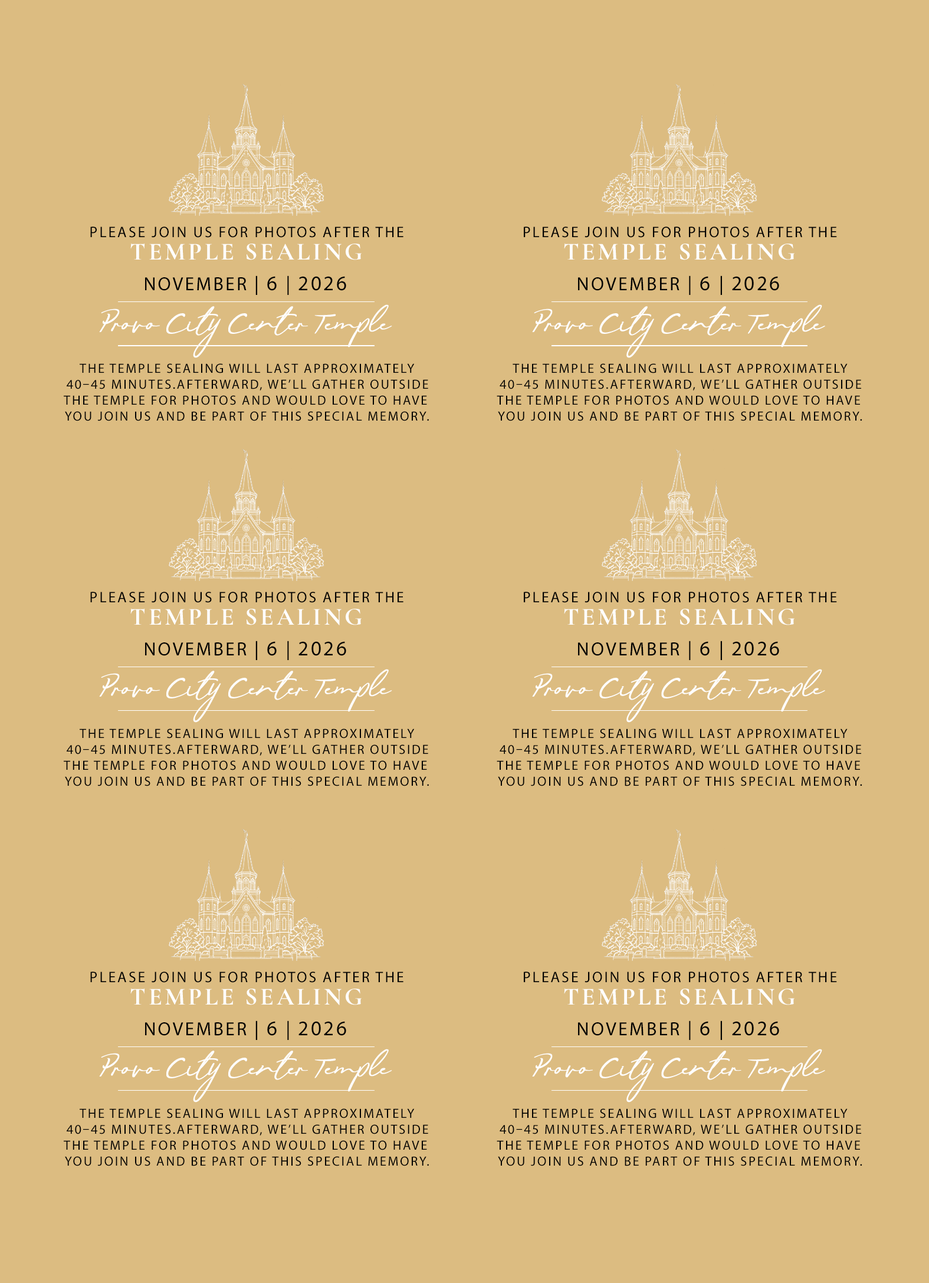
<style>
.page{position:relative;width:929px;height:1283px;background:#dcbc81}
.page>*{position:absolute;margin:0}
.t1{font:15.2px "MyriadPro-Regular";letter-spacing:0.1em;color:#000000;text-transform:uppercase}
.t2{font:24.7px "CormorantGaramond-Bold";letter-spacing:0.1em;color:#ffffff;text-transform:uppercase}
.t3{font:19px "MyriadPro-Regular";letter-spacing:0.1em;color:#000000}
.t4{font:20.9px "MyriadPro-Regular";letter-spacing:0.1em;color:#000000}
.t5{font:19px "ClagistaRegular";letter-spacing:-0.06em;color:#ffffff;font-weight:bold}
.t6{font:13.3px "MyriadPro-Regular";letter-spacing:0.1em;color:#000000;text-transform:uppercase}
</style>
<div class="page">
<p class="t1" style="left:90px;top:227px;width:314px;height:11px">Please join us for photos after the</p>
<p class="t1" style="left:524px;top:227px;width:313px;height:11px">Please join us for photos after the</p>
<p class="t2" style="left:130px;top:243px;width:232px;height:17px">Temple Sealing</p>
<p class="t2" style="left:564px;top:243px;width:231px;height:17px">Temple Sealing</p>
<p class="t3" style="left:145px;top:276px;width:201px;height:19px">NOVEMBER | <span class="t4">6 </span>| <span class="t4">2026</span></p>
<p class="t3" style="left:578px;top:276px;width:201px;height:19px">NOVEMBER | <span class="t4">6 </span>| <span class="t4">2026</span></p>
<p class="t5" style="left:99px;top:304px;width:293px;height:54px;text-align:center">Provo City Center Temple</p>
<p class="t5" style="left:532px;top:304px;width:293px;height:54px;text-align:center">Provo City Center Temple</p>
<p class="t6" style="left:64px;top:363px;width:365px;height:58px;text-align:center">The temple sealing will last approximately<br> 40–45 minutes.Afterward, we’ll gather outside <br>the temple for photos and would love to have <br>you join us and be part of this special memory.</p>
<p class="t6" style="left:497px;top:363px;width:366px;height:58px;text-align:center">The temple sealing will last approximately<br> 40–45 minutes.Afterward, we’ll gather outside <br>the temple for photos and would love to have <br>you join us and be part of this special memory.</p>
<p class="t1" style="left:90px;top:592px;width:314px;height:11px">Please join us for photos after the</p>
<p class="t1" style="left:524px;top:592px;width:313px;height:11px">Please join us for photos after the</p>
<p class="t2" style="left:130px;top:608px;width:232px;height:17px">Temple Sealing</p>
<p class="t2" style="left:564px;top:608px;width:231px;height:17px">Temple Sealing</p>
<p class="t3" style="left:145px;top:641px;width:201px;height:19px">NOVEMBER | <span class="t4">6 </span>| <span class="t4">2026</span></p>
<p class="t3" style="left:578px;top:641px;width:201px;height:19px">NOVEMBER | <span class="t4">6 </span>| <span class="t4">2026</span></p>
<p class="t5" style="left:99px;top:669px;width:293px;height:54px;text-align:center">Provo City Center Temple</p>
<p class="t5" style="left:532px;top:669px;width:293px;height:54px;text-align:center">Provo City Center Temple</p>
<p class="t6" style="left:64px;top:729px;width:365px;height:57px;text-align:center">The temple sealing will last approximately<br> 40–45 minutes.Afterward, we’ll gather outside <br>the temple for photos and would love to have <br>you join us and be part of this special memory.</p>
<p class="t6" style="left:497px;top:729px;width:366px;height:57px;text-align:center">The temple sealing will last approximately<br> 40–45 minutes.Afterward, we’ll gather outside <br>the temple for photos and would love to have <br>you join us and be part of this special memory.</p>
<p class="t1" style="left:90px;top:972px;width:314px;height:11px">Please join us for photos after the</p>
<p class="t1" style="left:524px;top:972px;width:313px;height:11px">Please join us for photos after the</p>
<p class="t2" style="left:130px;top:988px;width:232px;height:17px">Temple Sealing</p>
<p class="t2" style="left:564px;top:988px;width:231px;height:17px">Temple Sealing</p>
<p class="t3" style="left:145px;top:1021px;width:201px;height:19px">NOVEMBER | <span class="t4">6 </span>| <span class="t4">2026</span></p>
<p class="t3" style="left:578px;top:1021px;width:201px;height:19px">NOVEMBER | <span class="t4">6 </span>| <span class="t4">2026</span></p>
<p class="t5" style="left:99px;top:1049px;width:293px;height:54px;text-align:center">Provo City Center Temple</p>
<p class="t5" style="left:532px;top:1049px;width:293px;height:54px;text-align:center">Provo City Center Temple</p>
<p class="t6" style="left:64px;top:1109px;width:365px;height:57px;text-align:center">The temple sealing will last approximately<br> 40–45 minutes.Afterward, we’ll gather outside <br>the temple for photos and would love to have <br>you join us and be part of this special memory.</p>
<p class="t6" style="left:497px;top:1109px;width:366px;height:57px;text-align:center">The temple sealing will last approximately<br> 40–45 minutes.Afterward, we’ll gather outside <br>the temple for photos and would love to have <br>you join us and be part of this special memory.</p>
</div>
